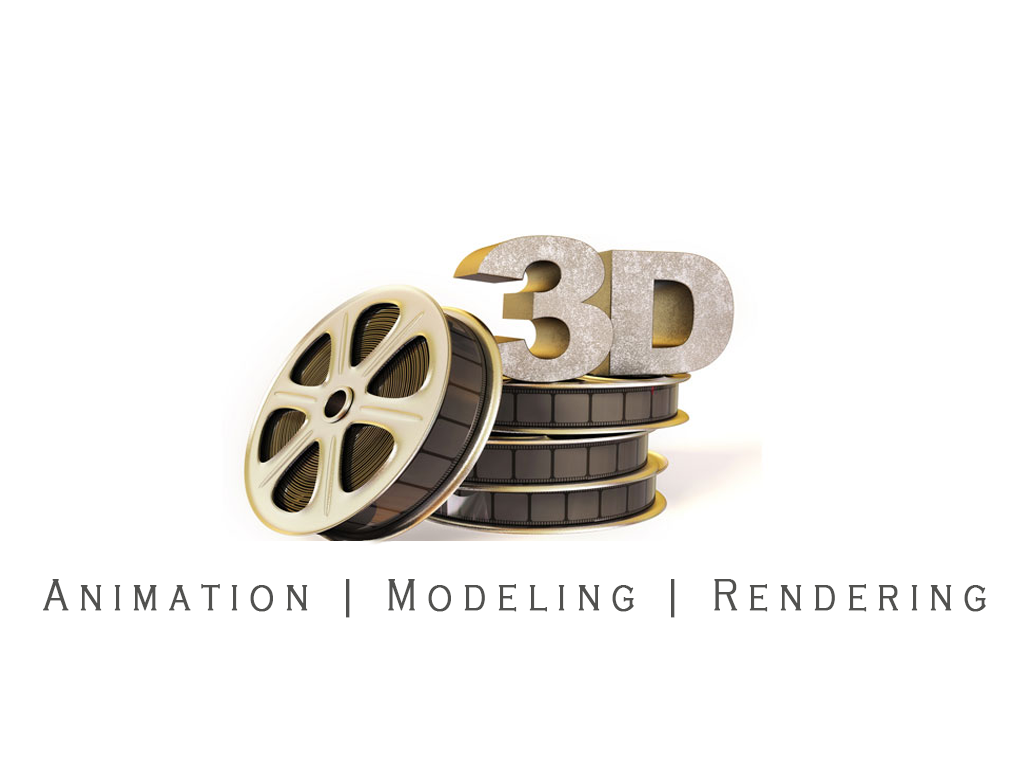
<style>
.page{position:relative;width:1024px;height:768px;background:#ffffff}
.page>*{position:absolute;margin:0}
.t1{font:45.8px "CopperplateGothic-Light";letter-spacing:0.32em;color:#51514f;font-weight:bold;scale:0.71 1}
</style>
<div class="page">
<p class="t1" style="left:43px;top:579px;width:943px;height:39px">Animation | Modeling | Rendering</p>
</div>
